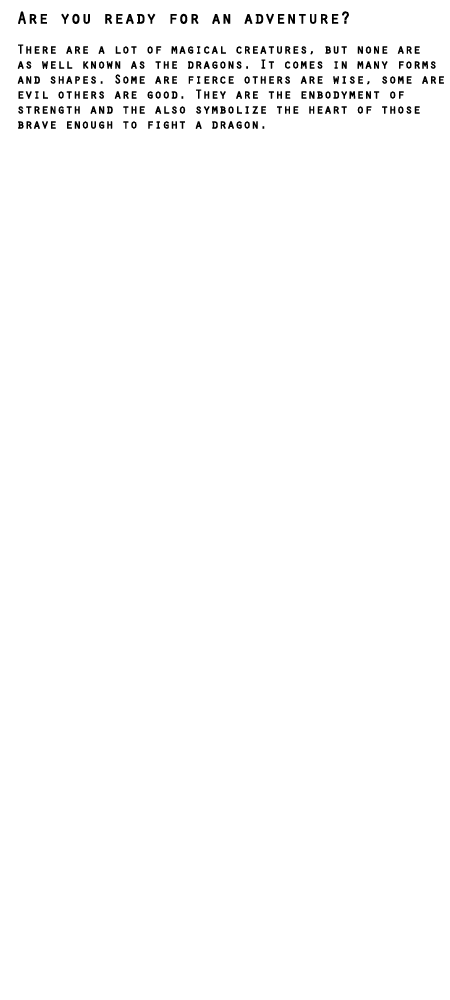
<style>
.page{position:relative;width:450px;height:1000px;background:#ffffff}
.page>*{position:absolute;margin:0}
.t1{font:12.5px "Orator-Regular";color:#000000;font-weight:bold}
.t2{font:16.7px "Orator-Regular";color:#000000;font-weight:bold}
</style>
<div class="page">
<p class="t1" style="left:17px;top:11px;width:427px;height:118px;text-align:right"><span class="t2">Are you ready for an adventure? <br></span><br>There are a lot of magical creatures, but none are<br>as well known as the dragons. It comes in many forms<br>and shapes. Some are fierce others are wise, some are<br>evil others are good. They are the enbodyment of<br>strength and the also symbolize the heart of those<br>brave enough to fight a dragon.</p>
</div>
